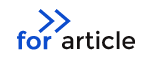
<style>
.page{position:relative;width:152px;height:62px;background:#ffffff}
.page>*{position:absolute;margin:0}
.t1{font:42.8px "Consolas";letter-spacing:-0.18em;color:#0c4ccd}
.t2{font:23.9px "Montserrat-Regular";color:#0c4ccd;font-weight:bold}
.t3{font:23.9px "Montserrat-Regular";color:#141111}
</style>
<div class="page">
<p class="t1" style="left:38px;top:9px;width:33px;height:24px">&gt;&gt;</p>
<p class="t2" style="left:17px;top:30px;width:35px;height:20px">for</p>
<p class="t3" style="left:62px;top:30px;width:73px;height:20px">article</p>
</div>
